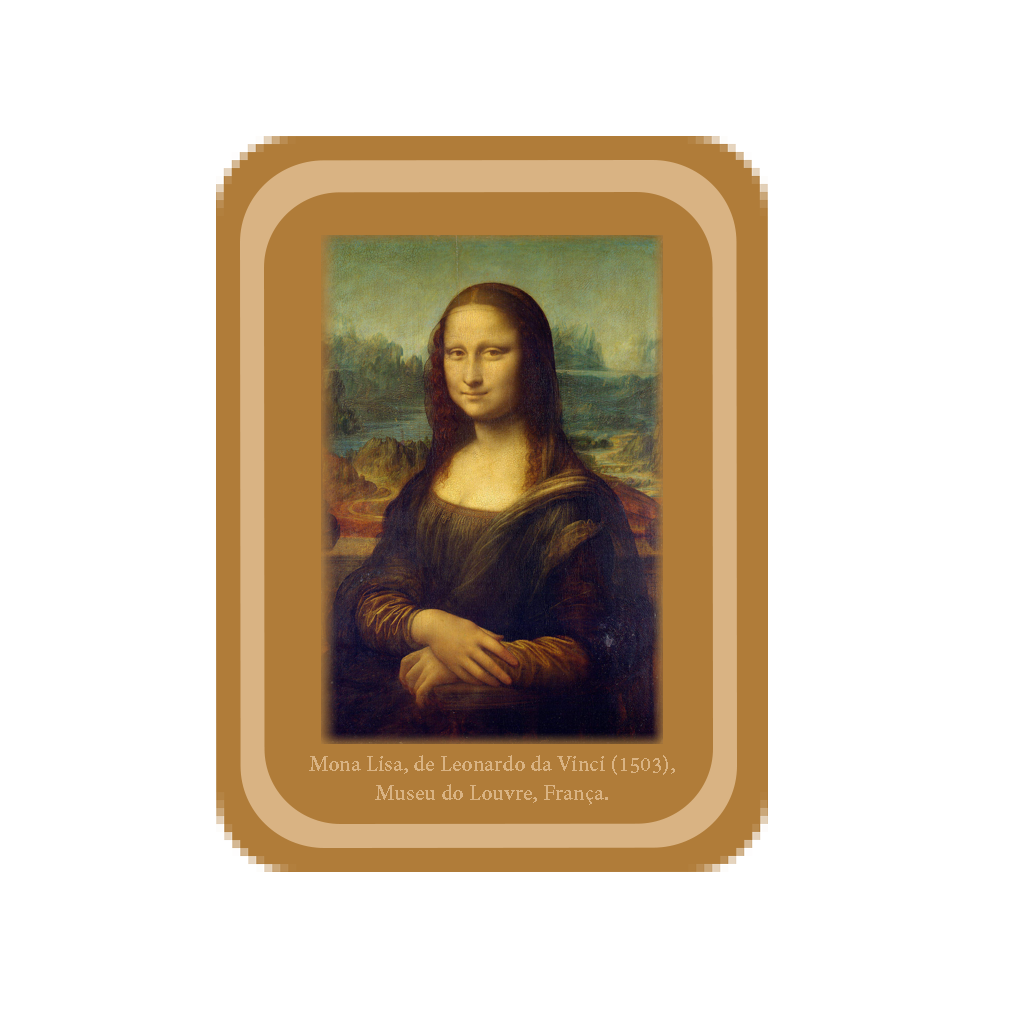
<style>
.page{position:relative;width:1024px;height:1024px;background:#ffffff}
.page>*{position:absolute;margin:0}
.t1{font:24.2px "AdobeDevanagari-Bold";color:#d9b383}
</style>
<div class="page">
<p class="t1" style="left:309px;top:755px;width:366px;height:50px;text-align:center">Mona Lisa, de Leonardo da Vinci (1503), Museu do Louvre, França.</p>
</div>
